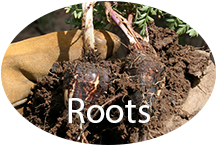
<style>
.page{position:relative;width:220px;height:147px;background:#ffffff}
.page>*{position:absolute;margin:0}
.t1{font:36px "MyriadPro-Regular";color:#fefefe}
</style>
<div class="page">
<p class="t1" style="left:68px;top:98px;width:82px;height:25px">Roots</p>
</div>
